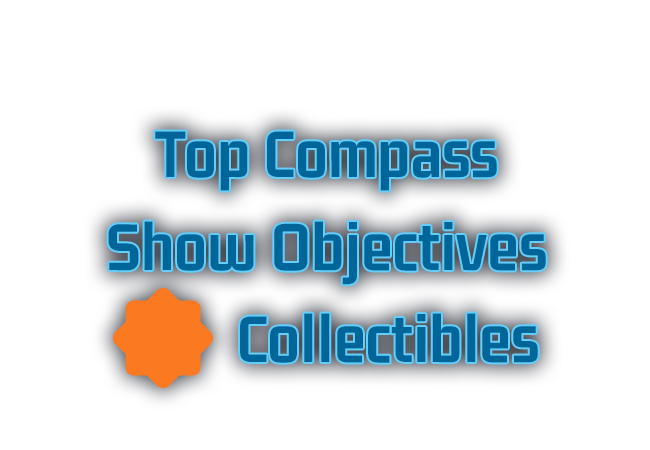
<style>
.page{position:relative;width:650px;height:450px;background:#ffffff}
.page>*{position:absolute;margin:0}
.t1{font:71.7px "GemunuLibre-Bold";color:#006699;font-weight:bold}
</style>
<div class="page">
<p class="t1" style="left:155px;top:131px;width:342px;height:60px">Top Compass</p>
<p class="t1" style="left:108px;top:221px;width:438px;height:64px">Show Objectives</p>
<p class="t1" style="left:240px;top:313px;width:298px;height:50px">Collectibles</p>
</div>
